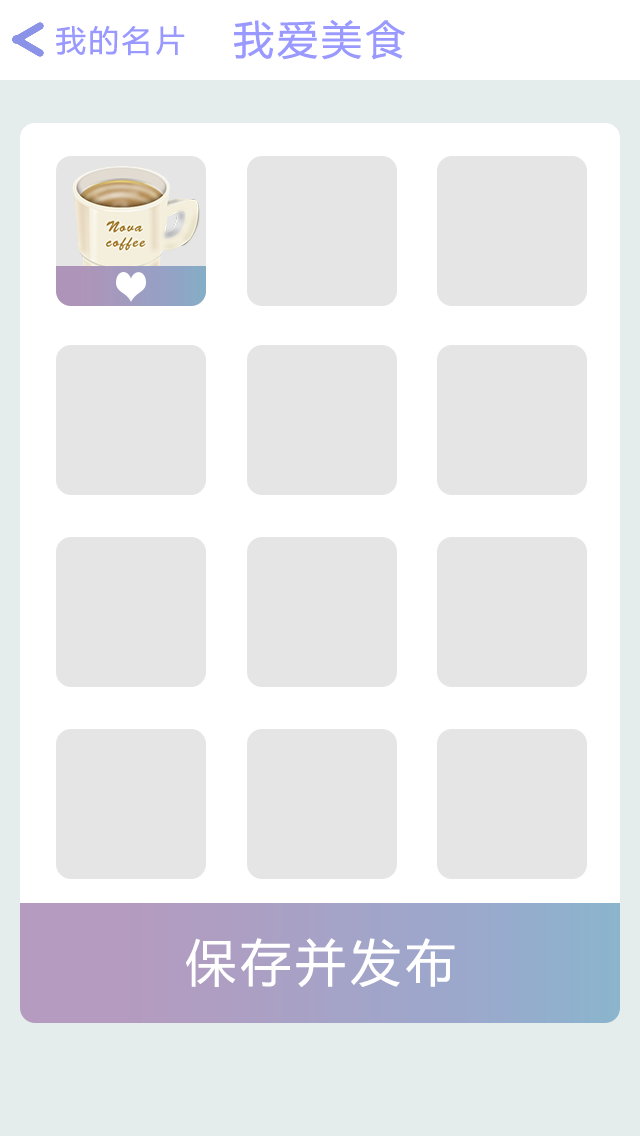
<style>
.page{position:relative;width:640px;height:1136px;background:#e5e5e5}
.page>*{position:absolute;margin:0}
.t1{font:30px "MicrosoftYaHei";letter-spacing:0.1em;color:#9999ff}
.t2{font:40px "MicrosoftYaHei";letter-spacing:0.1em;color:#9999ff}
.t3{font:50px "MicrosoftYaHei";letter-spacing:0.1em;color:#ffffff}
</style>
<div class="page">
<p class="t1" style="left:56px;top:25px;width:129px;height:31px">我的名片</p>
<p class="t2" style="left:234px;top:19px;width:172px;height:41px">我爱美食</p>
<p class="t3" style="left:186px;top:938px;width:269px;height:50px">保存并发布</p>
</div>
